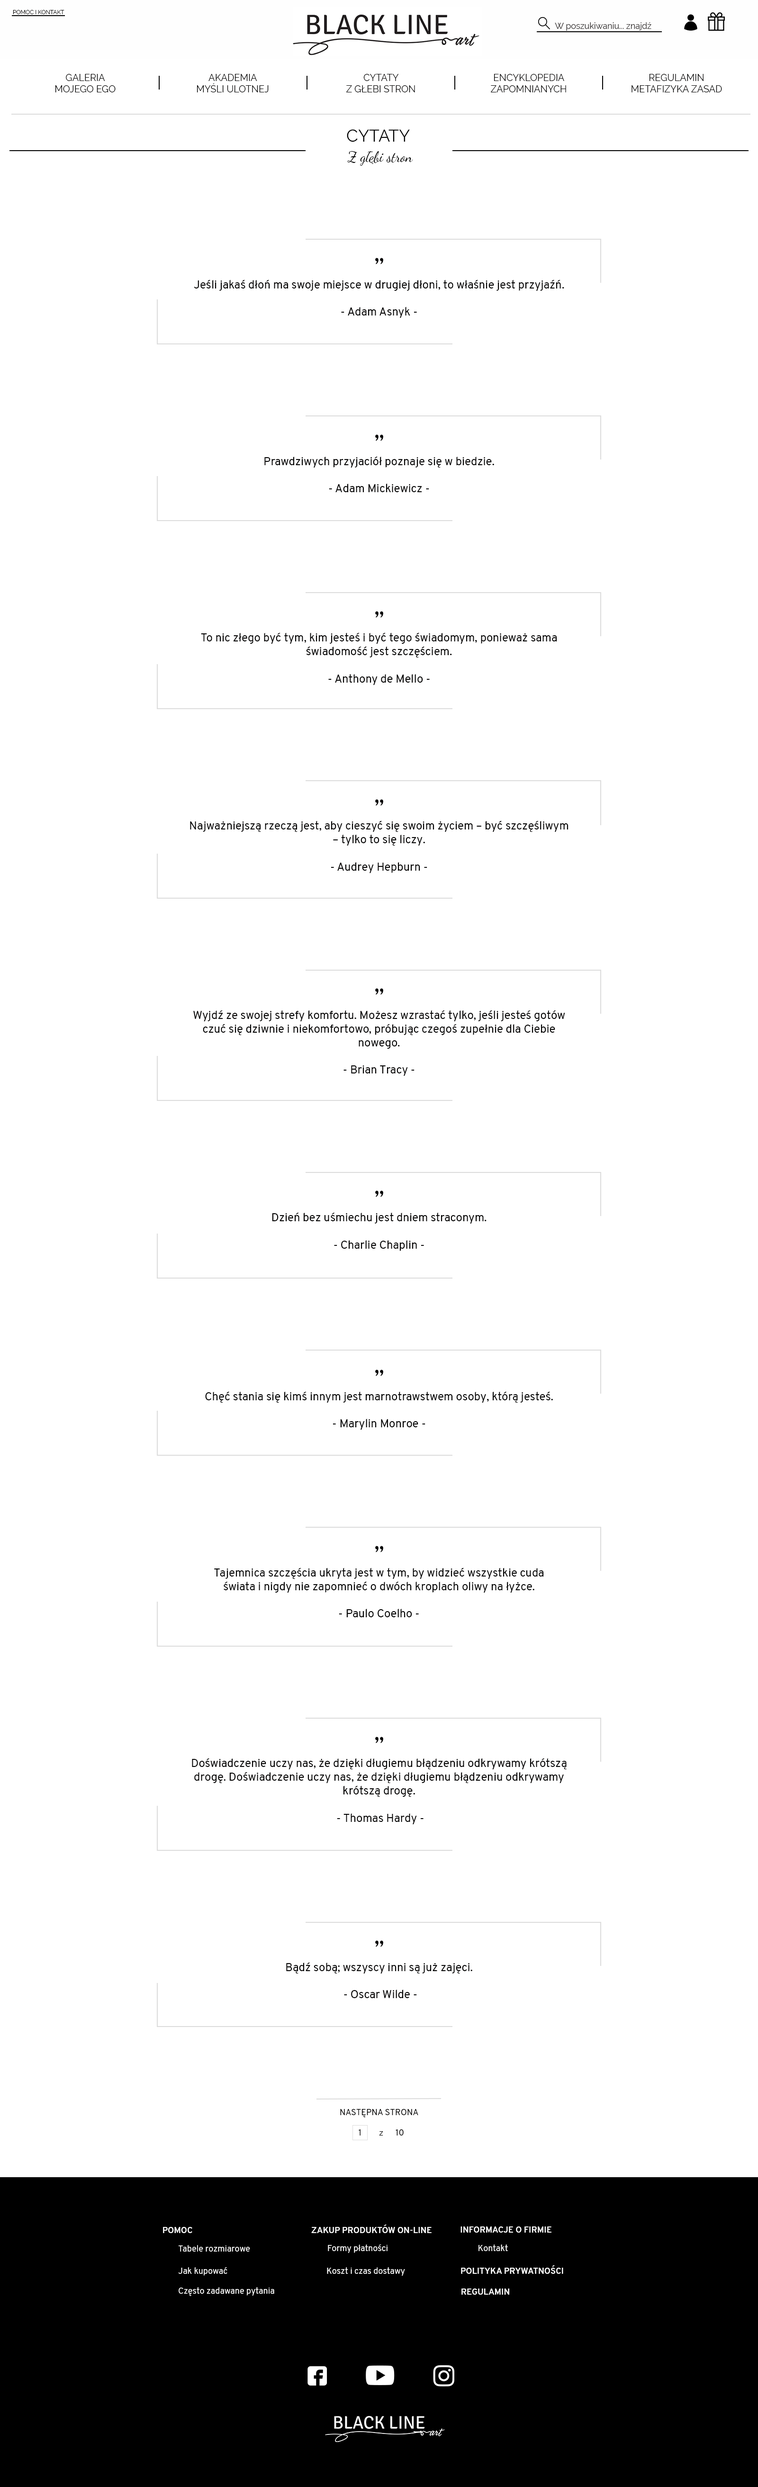
<style>
.page{position:relative;width:758px;height:2487px;background:#ffffff}
.page>*{position:absolute;margin:0}
.t1{font:5.7px "Raleway-Regular";color:#010000}
.t2{font:8.5px "Raleway-Regular";color:#322e2e}
.t3{font:9.5px "Raleway-Regular";color:#010000}
.t4{font:17.1px "Raleway-Regular";color:#000000}
.t5{font:14.2px "DancingScript-Regular";color:#000000}
.t6{font:11.4px "Overpass-Regular";color:#010000}
.t7{font:22.7px "Overpass-Regular";color:#010000}
.t8{font:11.4px "Overpass-Regular";color:#000000}
.t9{font:22.7px "Overpass-Regular";color:#000000}
.t10{font:8.5px "Overpass-Regular";color:#010000}
.t11{font:6.6px "Overpass-Regular";color:#010000}
.t12{font:8.5px "Overpass-Bold";color:#fefefe}
.t13{font:8.5px "Overpass-Regular";color:#fefefe}
</style>
<div class="page">
<p class="t1" style="left:13px;top:10px;width:51px;height:4px">POMOC I KONTAKT</p>
<p class="t2" style="left:555px;top:22px;width:96px;height:9px">W poszukiwaniu... znajdź</p>
<p class="t3" style="left:55px;top:74px;width:61px;height:18px;text-align:center">GALERIA<br>MOJEGO EGO</p>
<p class="t3" style="left:197px;top:74px;width:72px;height:18px;text-align:center">AKADEMIA<br>MYŚLI ULOTNEJ</p>
<p class="t3" style="left:346px;top:74px;width:69px;height:18px;text-align:center">CYTATY<br>Z GŁEBI STRON</p>
<p class="t3" style="left:491px;top:74px;width:75px;height:18px;text-align:center">ENCYKLOPEDIA ZAPOMNIANYCH</p>
<p class="t3" style="left:631px;top:74px;width:91px;height:18px;text-align:center">REGULAMIN<br>METAFIZYKA ZASAD</p>
<p class="t4" style="left:347px;top:129px;width:63px;height:13px">CYTATY</p>
<p class="t5" style="left:347px;top:151px;width:66px;height:15px">Z głębi stron</p>
<p class="t6" style="left:194px;top:258px;width:370px;height:60px;text-align:center"><span class="t7">„<br></span><br>Jeśli jakaś dłoń ma swoje miejsce w drugiej dłoni, to właśnie jest przyjaźń.<br><br>- Adam Asnyk -</p>
<p class="t6" style="left:264px;top:434px;width:230px;height:59px;text-align:center"><span class="t7">„<br></span><br>Prawdziwych przyjaciół poznaje się w biedzie. <br><br>- Adam Mickiewicz -</p>
<p class="t6" style="left:201px;top:611px;width:356px;height:74px;text-align:center"><span class="t7">„<br></span><br>To nic złego być tym, kim jesteś i być tego świadomym, ponieważ sama <br>świadomość jest szczęściem.<br><br>- Anthony de Mello -</p>
<p class="t6" style="left:190px;top:799px;width:378px;height:74px;text-align:center"><span class="t7">„<br></span><br>Najważniejszą rzeczą jest, aby cieszyć się swoim życiem – być szczęśliwym – tylko to się liczy. <br><br>- Audrey Hepburn -</p>
<p class="t6" style="left:193px;top:988px;width:372px;height:88px;text-align:center"><span class="t7">„<br></span><br>Wyjdź ze swojej strefy komfortu. Możesz wzrastać tylko, jeśli jesteś gotów czuć się dziwnie i niekomfortowo, próbując czegoś zupełnie dla Ciebie nowego.<br><br>- Brian Tracy -</p>
<p class="t6" style="left:272px;top:1190px;width:214px;height:61px;text-align:center"><span class="t7">„<br></span><br>Dzień bez uśmiechu jest dniem straconym.<br><br>- Charlie Chaplin -</p>
<p class="t8" style="left:205px;top:1369px;width:348px;height:61px;text-align:center"><span class="t9">„<br></span><br>Chęć stania się kimś innym jest marnotrawstwem osoby, którą jesteś.<br><br>- Marylin Monroe -</p>
<p class="t8" style="left:214px;top:1546px;width:330px;height:71px;text-align:center"><span class="t9">„<br></span><br>Tajemnica szczęścia ukryta jest w tym, by widzieć wszystkie cuda <br>świata i nigdy nie zapomnieć o dwóch kroplach oliwy na łyżce.<br><br>- Paulo Coelho -</p>
<p class="t6" style="left:192px;top:1737px;width:375px;height:87px;text-align:center"><span class="t7">„<br></span><br>Doświadczenie uczy nas, że dzięki długiemu błądzeniu odkrywamy krótszą drogę. Doświadczenie uczy nas, że dzięki długiemu błądzeniu odkrywamy krótszą drogę. <br><br> - Thomas Hardy -</p>
<p class="t6" style="left:286px;top:1940px;width:186px;height:58px;text-align:center"><span class="t7">„<br></span><br>Bądź sobą; wszyscy inni są już zajęci.<br><br> - Oscar Wilde -</p>
<p class="t10" style="left:340px;top:2109px;width:78px;height:8px">NASTĘPNA STRONA</p>
<p class="t10" style="left:359px;top:2129px;width:1px;height:6px">1</p>
<p class="t10" style="left:396px;top:2129px;width:8px;height:6px">10</p>
<p class="t11" style="left:379px;top:2131px;width:4px;height:4px">Z</p>
<p class="t12" style="left:311px;top:2224px;width:121px;height:9px">ZAKUP PRODUKTÓW ON-LINE</p>
<p class="t12" style="left:163px;top:2227px;width:29px;height:6px">POMOC</p>
<p class="t12" style="left:460px;top:2226px;width:91px;height:6px">INFORMACJE O FIRMIE</p>
<p class="t13" style="left:178px;top:2245px;width:72px;height:6px">Tabele rozmiarowe</p>
<p class="t13" style="left:328px;top:2244px;width:59px;height:9px">Formy płatności</p>
<p class="t13" style="left:478px;top:2244px;width:30px;height:7px">Kontakt</p>
<p class="t13" style="left:178px;top:2267px;width:49px;height:9px">Jak kupować</p>
<p class="t13" style="left:327px;top:2267px;width:78px;height:9px">Koszt i czas dostawy</p>
<p class="t12" style="left:461px;top:2265px;width:102px;height:9px">POLITYKA PRYWATNOŚCI</p>
<p class="t13" style="left:179px;top:2287px;width:95px;height:9px">Często zadawane pytania</p>
<p class="t12" style="left:461px;top:2288px;width:48px;height:7px">REGULAMIN</p>
</div>
